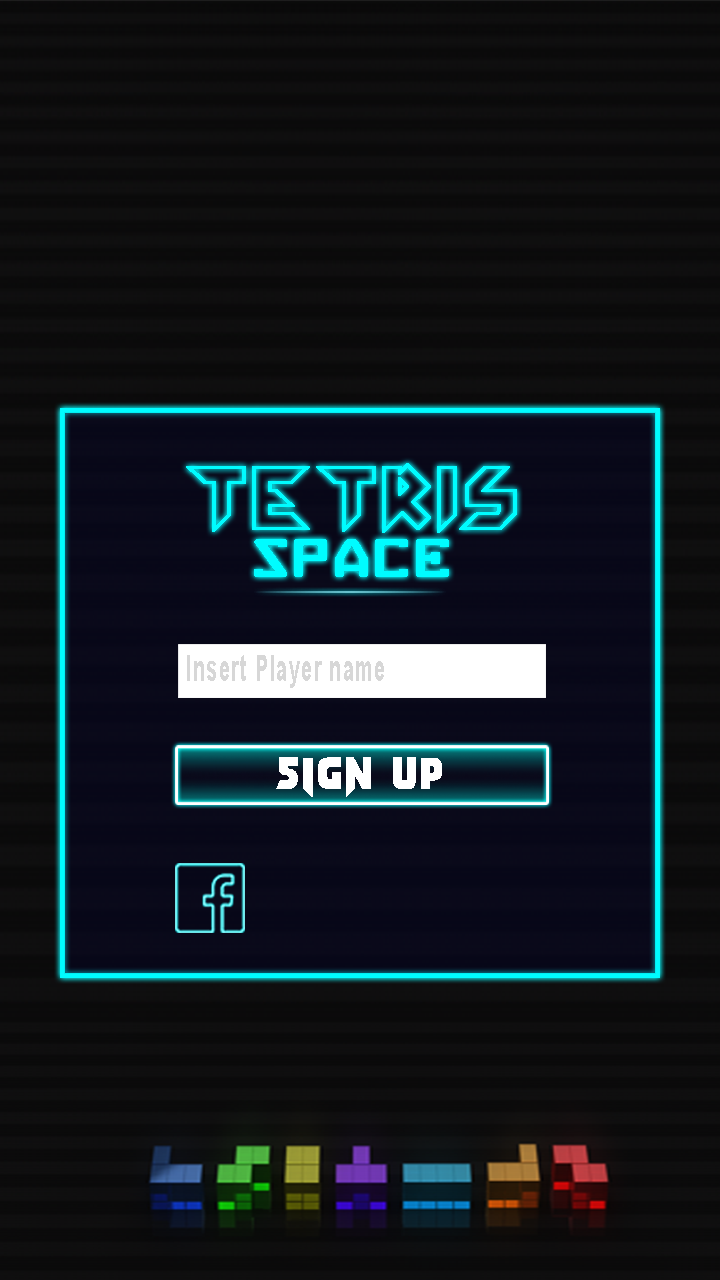
<style>
.page{position:relative;width:720px;height:1280px}
.page>*{position:absolute;margin:0}
.t1{font:77.8px/72px "Arkanoid";letter-spacing:0.06em;color:#00fcff;font-weight:bold}
.t2{font:48px/48px "BabyUniverse";letter-spacing:0.1em;color:#00fcff}
.t3{font:36.3px "Arial-BoldMT";letter-spacing:0.06em;color:#d7d7d7;scale:0.55 1}
.t4{font:45.4px "Arwing";letter-spacing:0.06em;color:#ffffff}
</style>
<div class="page">
<p class="t1" style="left:186px;top:463px;width:331px;height:114px;text-align:center">TETRIS<br><span class="t2">SPACE</span></p>
<p class="t3" style="left:187px;top:655px;width:197px;height:33px">Insert Player name</p>
<p class="t4" style="left:276px;top:757px;width:166px;height:40px">SIGN UP</p>
</div>
